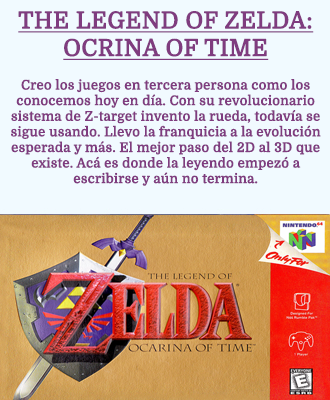
<style>
.page{position:relative;width:330px;height:400px;background:#f1faff}
.page>*{position:absolute;margin:0}
.t1{font:13px "Domine-Regular";color:#7f3c7f;font-weight:bold}
.t2{font:23px "Domine-Regular";color:#7f3c7f;font-weight:bold;text-decoration:underline}
</style>
<div class="page">
<p class="t1" style="left:11px;top:11px;width:310px;height:175px;text-align:center"><span class="t2">THE LEGEND OF ZELDA: OCRINA OF TIME<br><br></span>Creo los juegos en tercera persona como los conocemos hoy en día. Con su revolucionario sistema de Z-target invento la rueda, todavía se sigue usando. Llevo la franquicia a la evolución esperada y más. El mejor paso del 2D al 3D que existe. Acá es donde la leyendo empezó a <br>escribirse y aún no termina.</p>
</div>
